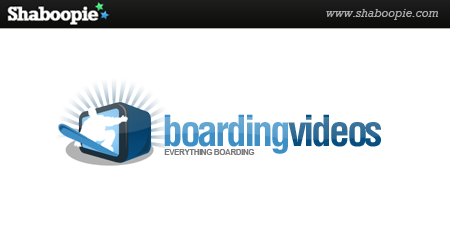
<style>
.page{position:relative;width:450px;height:250px;background:#ffffff}
.page>*{position:absolute;margin:0}
.t1{font:41.7px "Helvetica-Condensed-Bold";letter-spacing:-0.075em}
.t2{font:8.3px "Arial-BoldMT";letter-spacing:-0.075em;color:#7b7b7b}
</style>
<div class="page">
<p class="t1" style="left:164px;top:114px;width:217px;height:40px">boardingvideos</p>
<p class="t2" style="left:164px;top:149px;width:91px;height:6px">EVERYTHING BOARDING</p>
</div>
